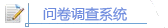
<style>
.page{position:relative;width:168px;height:28px;background:#ffffff}
.page>*{position:absolute;margin:0}
.t1{font:14px "MicrosoftYaHei";color:#6f8cde}
</style>
<div class="page">
<p class="t1" style="left:43px;top:7px;width:84px;height:14px">问卷调查系统</p>
</div>
